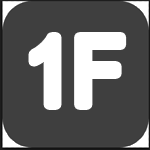
<style>
.page{position:relative;width:150px;height:150px;background:#3f3f3f}
.page>*{position:absolute;margin:0}
.t1{font:94.2px "ArialMT";color:#ffffff;scale:0.93 1}
</style>
<div class="page">
<p class="t1" style="left:33px;top:37px;width:89px;height:68px">1F</p>
</div>
